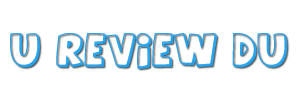
<style>
.page{position:relative;width:300px;height:100px;background:#ffffff}
.page>*{position:absolute;margin:0}
.t1{font:31px "AgentOrange";color:#29a4eb}
.t2{font:26px "AgentOrange";color:#29a4eb}
</style>
<div class="page">
<p class="t1" style="left:10px;top:32px;width:278px;height:37px"><span class="t2"><br></span>U REVIEW DU</p>
</div>
